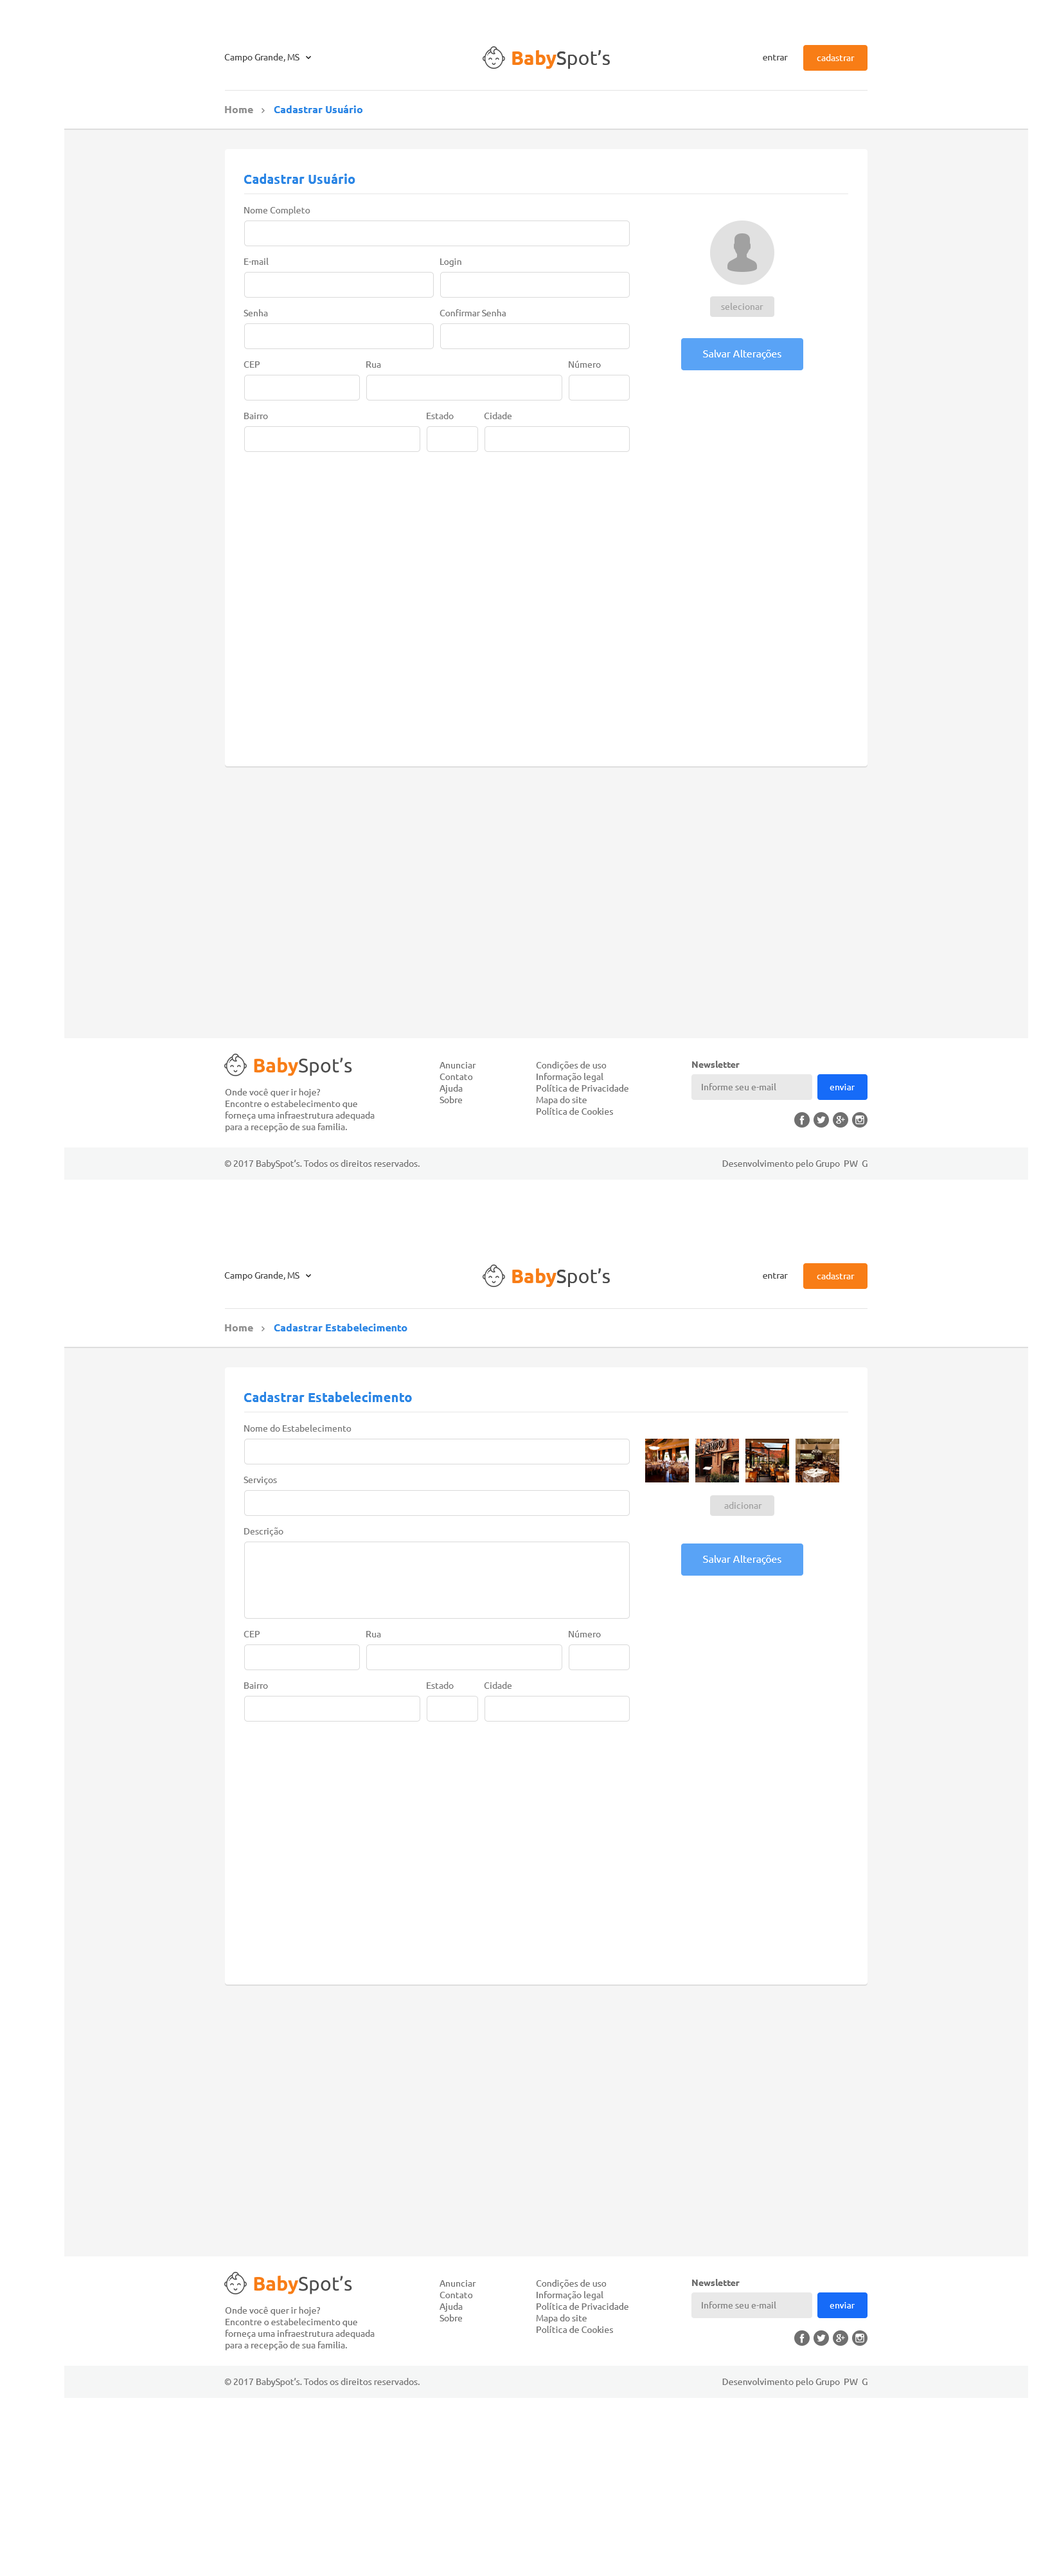
<style>
.page{position:relative;width:1059px;height:2574px;background:#ffffff}
.page>*{position:absolute;margin:0}
.t1{font:9px "Ubuntu";color:#4b4b4b}
.t2{font:19.3px "Ubuntu";color:#4b4b4b}
.t3{font:19.3px "Ubuntu-Bold";color:#f87d16}
.t4{font:9px "Ubuntu";color:#ffffff}
.t5{font:10.3px "Ubuntu-Bold";color:#2c86e5}
.t6{font:10.3px "Ubuntu-Bold";color:#909090}
.t7{font:12.9px "Ubuntu-Bold";color:#2c86e5}
.t8{font:9px "Ubuntu";color:#7a7a7a}
.t9{font:9px "Ubuntu";color:#a1a1a1}
.t10{font:10.3px "Ubuntu";color:#ffffff}
.t11{font:19.2px "Ubuntu";color:#4b4b4b}
.t12{font:19.2px "Ubuntu-Bold";color:#f87d16}
.t13{font:9px/11.6px "Ubuntu";color:#747474}
.t14{font:9px "Ubuntu-Bold";color:#6c6c6c}
.t15{font:9px "Ubuntu";color:#838383}
.t16{font:9px "Ubuntu";color:#747474}
</style>
<div class="page">
<p class="t1" style="left:224px;top:53px;width:76px;height:9px">Campo Grande, MS</p>
<p class="t2" style="left:512px;top:50px;width:98px;height:19px"><span class="t3">Baby</span>Spot’s</p>
<p class="t1" style="left:763px;top:55px;width:25px;height:5px">entrar</p>
<p class="t4" style="left:817px;top:54px;width:38px;height:7px">cadastrar</p>
<p class="t5" style="left:225px;top:105px;width:138px;height:8px"><span class="t6">Home        </span>Cadastrar Usuário</p>
<p class="t7" style="left:244px;top:174px;width:112px;height:10px">Cadastrar Usuário</p>
<p class="t8" style="left:244px;top:206px;width:66px;height:9px">Nome Completo</p>
<p class="t8" style="left:244px;top:258px;width:25px;height:7px">E-mail</p>
<p class="t8" style="left:440px;top:258px;width:22px;height:9px">Login</p>
<p class="t9" style="left:721px;top:303px;width:43px;height:7px">selecionar</p>
<p class="t8" style="left:244px;top:309px;width:24px;height:7px">Senha</p>
<p class="t8" style="left:440px;top:309px;width:66px;height:7px">Confirmar Senha</p>
<p class="t10" style="left:703px;top:350px;width:79px;height:9px">Salvar Alterações</p>
<p class="t8" style="left:244px;top:361px;width:16px;height:7px">CEP</p>
<p class="t8" style="left:366px;top:361px;width:15px;height:7px">Rua</p>
<p class="t8" style="left:569px;top:361px;width:32px;height:7px">Número</p>
<p class="t8" style="left:244px;top:413px;width:24px;height:6px">Bairro</p>
<p class="t8" style="left:427px;top:412px;width:27px;height:7px">Estado</p>
<p class="t8" style="left:484px;top:412px;width:28px;height:7px">Cidade</p>
<p class="t11" style="left:254px;top:1057px;width:98px;height:19px"><span class="t12">Baby</span>Spot’s</p>
<p class="t13" style="left:440px;top:1062px;width:36px;height:41px">Anunciar<br>Contato<br>Ajuda<br>Sobre</p>
<p class="t13" style="left:536px;top:1061px;width:93px;height:54px">Condições de uso<br>Informação legal<br>Política de Privacidade<br>Mapa do site<br>Política de Cookies</p>
<p class="t14" style="left:692px;top:1061px;width:48px;height:7px">Newsletter</p>
<p class="t15" style="left:702px;top:1083px;width:75px;height:7px">Informe seu e-mail</p>
<p class="t4" style="left:830px;top:1084px;width:25px;height:6px">enviar</p>
<p class="t13" style="left:225px;top:1088px;width:150px;height:44px">Onde você quer ir hoje?<br>Encontre o estabelecimento que forneça uma infraestrutura adequada para a recepção de sua familia.</p>
<p class="t16" style="left:225px;top:1160px;width:195px;height:9px">© 2017 BabySpot’s. Todos os direitos reservados.</p>
<p class="t16" style="left:723px;top:1160px;width:145px;height:9px">Desenvolvimento pelo Grupo ​ ​PW ​ ​G</p>
<p class="t1" style="left:224px;top:1272px;width:76px;height:9px">Campo Grande, MS</p>
<p class="t2" style="left:512px;top:1268px;width:98px;height:19px"><span class="t3">Baby</span>Spot’s</p>
<p class="t1" style="left:763px;top:1273px;width:25px;height:6px">entrar</p>
<p class="t4" style="left:817px;top:1272px;width:38px;height:7px">cadastrar</p>
<p class="t5" style="left:225px;top:1324px;width:183px;height:7px"><span class="t6">Home        </span>Cadastrar Estabelecimento</p>
<p class="t7" style="left:244px;top:1392px;width:168px;height:10px">Cadastrar Estabelecimento</p>
<p class="t8" style="left:244px;top:1425px;width:108px;height:7px">Nome do Estabelecimento</p>
<p class="t8" style="left:244px;top:1477px;width:33px;height:8px">Serviços</p>
<p class="t9" style="left:724px;top:1502px;width:38px;height:7px">adicionar</p>
<p class="t8" style="left:244px;top:1527px;width:40px;height:9px">Descrição</p>
<p class="t10" style="left:703px;top:1555px;width:79px;height:10px">Salvar Alterações</p>
<p class="t8" style="left:244px;top:1631px;width:16px;height:6px">CEP</p>
<p class="t8" style="left:366px;top:1631px;width:15px;height:6px">Rua</p>
<p class="t8" style="left:569px;top:1630px;width:32px;height:7px">Número</p>
<p class="t8" style="left:244px;top:1682px;width:24px;height:7px">Bairro</p>
<p class="t8" style="left:427px;top:1682px;width:27px;height:7px">Estado</p>
<p class="t8" style="left:484px;top:1682px;width:28px;height:7px">Cidade</p>
<p class="t11" style="left:254px;top:2275px;width:98px;height:19px"><span class="t12">Baby</span>Spot’s</p>
<p class="t13" style="left:440px;top:2280px;width:36px;height:41px">Anunciar<br>Contato<br>Ajuda<br>Sobre</p>
<p class="t13" style="left:536px;top:2280px;width:93px;height:53px">Condições de uso<br>Informação legal<br>Política de Privacidade<br>Mapa do site<br>Política de Cookies</p>
<p class="t14" style="left:692px;top:2279px;width:48px;height:7px">Newsletter</p>
<p class="t13" style="left:225px;top:2307px;width:150px;height:43px">Onde você quer ir hoje?<br>Encontre o estabelecimento que forneça uma infraestrutura adequada para a recepção de sua familia.</p>
<p class="t15" style="left:702px;top:2301px;width:75px;height:7px">Informe seu e-mail</p>
<p class="t4" style="left:830px;top:2302px;width:25px;height:6px">enviar</p>
<p class="t16" style="left:225px;top:2378px;width:195px;height:9px">© 2017 BabySpot’s. Todos os direitos reservados.</p>
<p class="t16" style="left:723px;top:2378px;width:145px;height:9px">Desenvolvimento pelo Grupo ​ ​PW ​ ​G</p>
</div>
